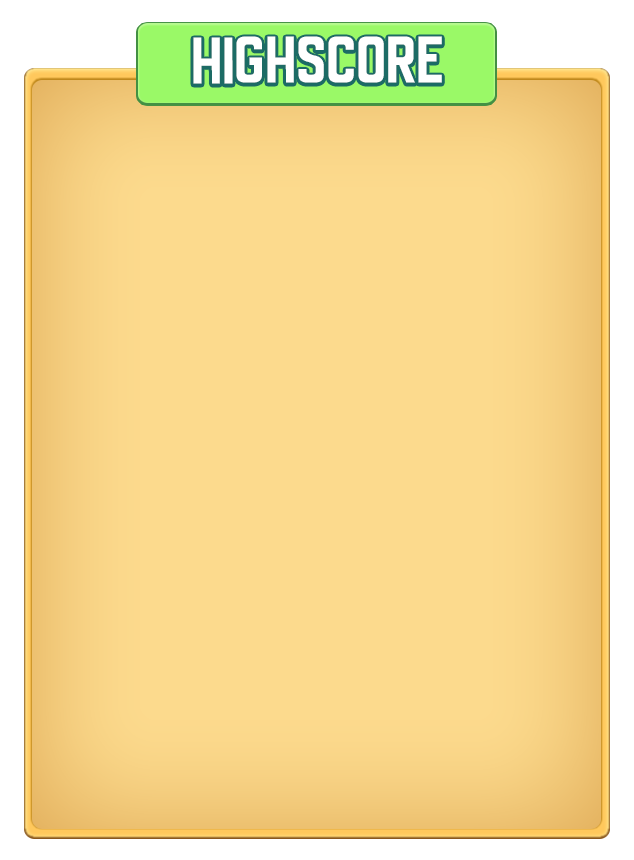
<style>
.page{position:relative;width:634px;height:860px;background:#fcda8d}
.page>*{position:absolute;margin:0}
.t1{font:59.2px "UniversalKnowledge";letter-spacing:-0.02em;color:#ffffff;scale:1.03 1}
</style>
<div class="page">
<p class="t1" style="left:193px;top:36px;width:249px;height:48px">HIGHSCORE</p>
</div>
